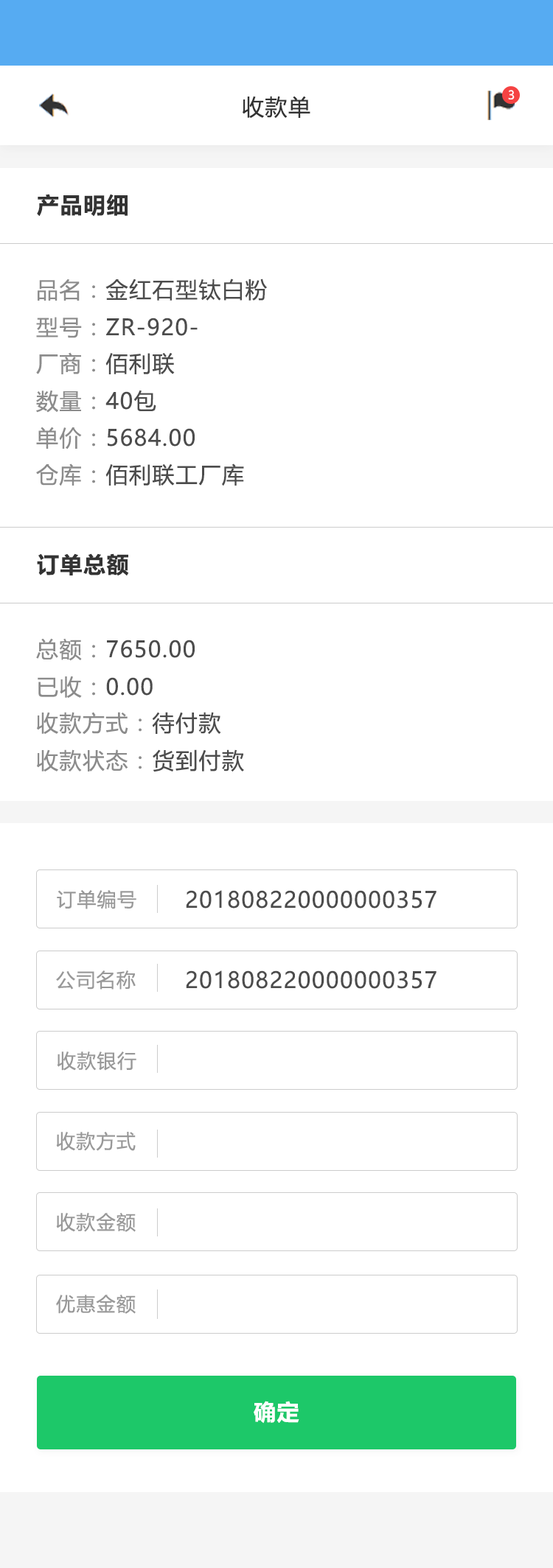
<style>
.page{position:relative;width:553px;height:1568px;background:#ffffff}
.page>*{position:absolute;margin:0}
.t1{font:11.8px "MicrosoftYaHeiUI";color:#ffffff}
.t2{font:22.1px "MicrosoftYaHeiUI";letter-spacing:0.05em;color:#333333}
.t3{font:22.1px "MicrosoftYaHeiUI-Bold";letter-spacing:0.05em;color:#333333}
.t4{font:22.1px "MicrosoftYaHeiUI";letter-spacing:0.05em;color:#4c4c4c}
.t5{font:22.1px "MicrosoftYaHeiUI";letter-spacing:0.05em;color:#8c8c8c}
.t6{font:19.2px "MicrosoftYaHeiUI";letter-spacing:0.05em;color:#999999}
.t7{font:22.1px "MicrosoftYaHeiUI-Bold";letter-spacing:0.05em;color:#ffffff}
</style>
<div class="page">
<p class="t1" style="left:508px;top:90px;width:6px;height:9px">3</p>
<p class="t2" style="left:242px;top:96px;width:68px;height:22px">收款单</p>
<p class="t3" style="left:37px;top:194px;width:90px;height:23px">产品明细</p>
<p class="t4" style="left:38px;top:279px;width:229px;height:22px"><span class="t5">品名：</span>金红石型钛白粉</p>
<p class="t4" style="left:36px;top:317px;width:161px;height:21px"><span class="t5">型号：</span>ZR-920-</p>
<p class="t5" style="left:36px;top:352px;width:139px;height:22px">厂商：<span class="t4">佰利联</span></p>
<p class="t5" style="left:36px;top:390px;width:120px;height:23px">数量：<span class="t4">40包</span></p>
<p class="t4" style="left:36px;top:427px;width:159px;height:22px"><span class="t5">单价：</span>5684.00</p>
<p class="t4" style="left:36px;top:463px;width:208px;height:23px"><span class="t5">仓库：</span>佰利联工厂库</p>
<p class="t3" style="left:37px;top:553px;width:92px;height:23px">订单总额</p>
<p class="t4" style="left:36px;top:638px;width:159px;height:23px"><span class="t5">总额：</span>7650.00</p>
<p class="t4" style="left:38px;top:676px;width:115px;height:22px"><span class="t5">已收：</span>0.00</p>
<p class="t5" style="left:37px;top:712px;width:184px;height:23px">收款方式：<span class="t4">待付款</span></p>
<p class="t5" style="left:37px;top:749px;width:207px;height:23px">收款状态：<span class="t4">货到付款</span></p>
<p class="t6" style="left:57px;top:890px;width:79px;height:19px">订单编号</p>
<p class="t4" style="left:186px;top:890px;width:250px;height:19px">201808220000000357</p>
<p class="t6" style="left:56px;top:970px;width:80px;height:20px">公司名称</p>
<p class="t4" style="left:186px;top:970px;width:250px;height:19px">201808220000000357</p>
<p class="t6" style="left:57px;top:1051px;width:79px;height:20px">收款银行</p>
<p class="t6" style="left:56px;top:1132px;width:80px;height:19px">收款方式</p>
<p class="t6" style="left:56px;top:1213px;width:80px;height:19px">收款金额</p>
<p class="t6" style="left:56px;top:1295px;width:80px;height:19px">优惠金额</p>
<p class="t7" style="left:253px;top:1401px;width:46px;height:23px">确定</p>
</div>
